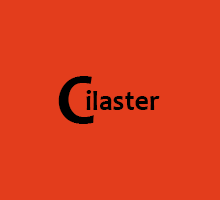
<style>
.page{position:relative;width:220px;height:200px;background:#e33d1c}
.page>*{position:absolute;margin:0}
.t1{font:72px "Candara-Bold";color:#000000}
.t2{font:28px "Candara-Bold";color:#000000}
</style>
<div class="page">
<p class="t1" style="left:58px;top:76px;width:36px;height:48px">C</p>
<p class="t2" style="left:86px;top:90px;width:74px;height:20px">ilaster</p>
</div>
